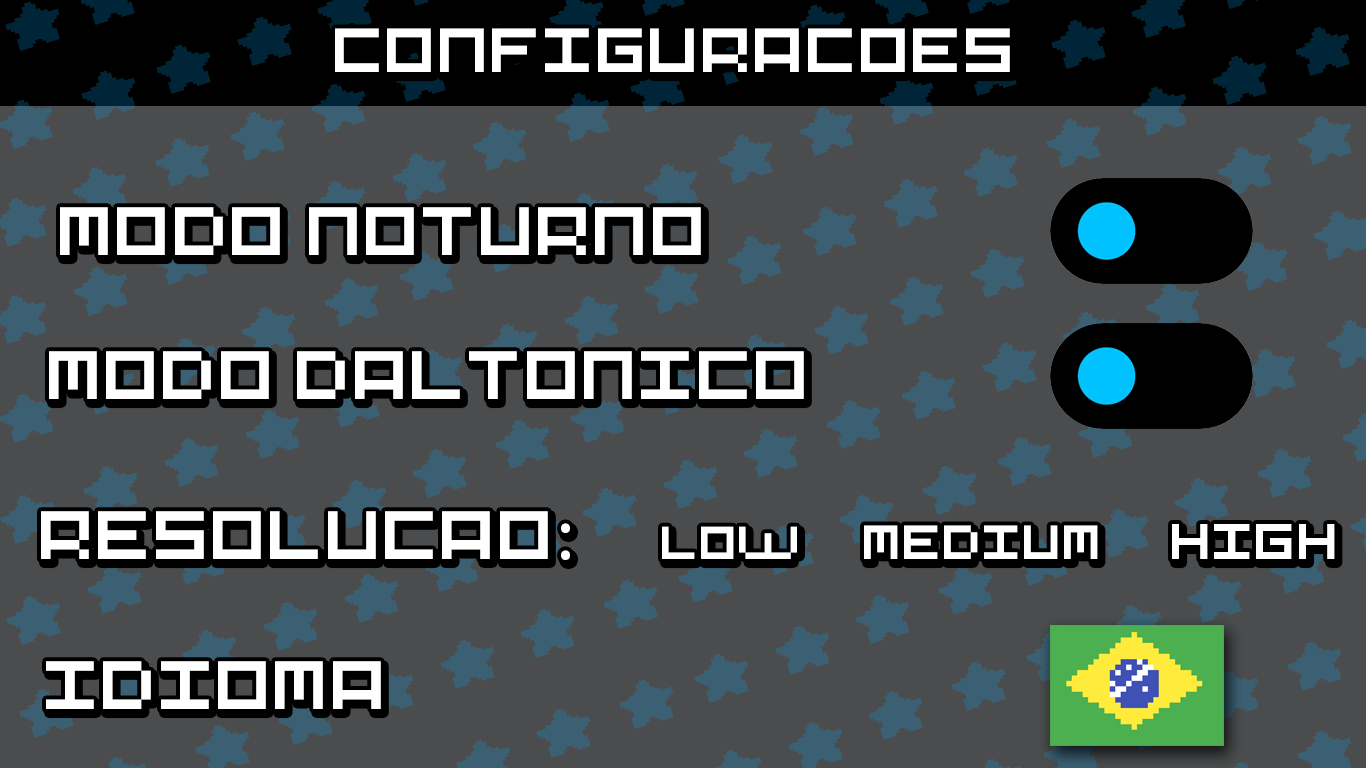
<style>
.page{position:relative;width:1366px;height:768px;background:#4b4c4d}
.page>*{position:absolute;margin:0}
.t1{font:69.7px "Pixel-Art";color:#ffffff}
.t2{font:76.4px "Pixel-Art";color:#ffffff}
.t3{font:76.4px "MyriadPro-Regular";color:#ffffff}
.t4{font:51.4px "Pixel-Art";color:#ffffff}
.t5{font:53.7px "Pixel-Art";color:#ffffff}
.t6{font:56px "Pixel-Art";color:#ffffff}
</style>
<div class="page">
<p class="t1" style="left:335px;top:28px;width:675px;height:44px">configuracoes</p>
<p class="t2" style="left:60px;top:207px;width:641px;height:48px">modo noturno</p>
<p class="t2" style="left:49px;top:351px;width:755px;height:48px">modo daltonico</p>
<p class="t2" style="left:41px;top:511px;width:529px;height:49px"><span class="t3">:</span>resolucao</p>
<p class="t4" style="left:662px;top:526px;width:135px;height:33px">low</p>
<p class="t5" style="left:864px;top:525px;width:234px;height:34px">medium</p>
<p class="t6" style="left:1172px;top:524px;width:163px;height:35px">high</p>
<p class="t2" style="left:46px;top:661px;width:335px;height:48px">idioma</p>
</div>
